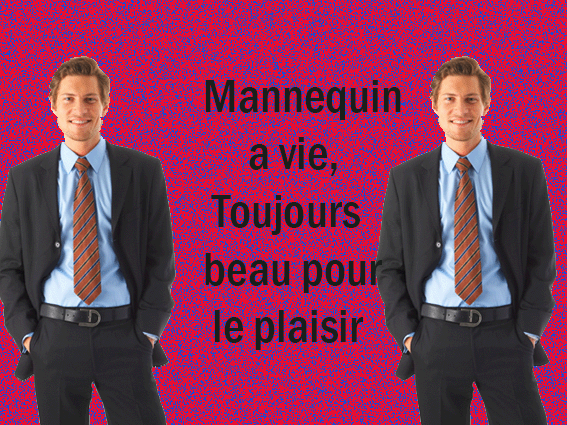
<style>
.page{position:relative;width:567px;height:425px;background:#e70f33}
.page>*{position:absolute;margin:0}
.t1{font:48px "FranklinGothic-MediumCond";color:#191e1b}
</style>
<div class="page">
<p class="t1" style="left:205px;top:80px;width:196px;height:270px">Mannequin<br>     a vie,<br> Toujours<br>beau pour<br> le plaisir</p>
</div>
